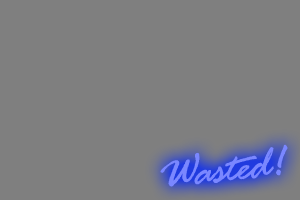
<style>
.page{position:relative;width:300px;height:200px;background:#7f7f7f}
.page>*{position:absolute;margin:0}
.t1{font:48px "RageItalicLetPlain";color:#7a87ff}
</style>
<div class="page">
<p class="t1" style="left:160px;top:144px;width:128px;height:43px;rotate:-6deg">Wasted!</p>
</div>
